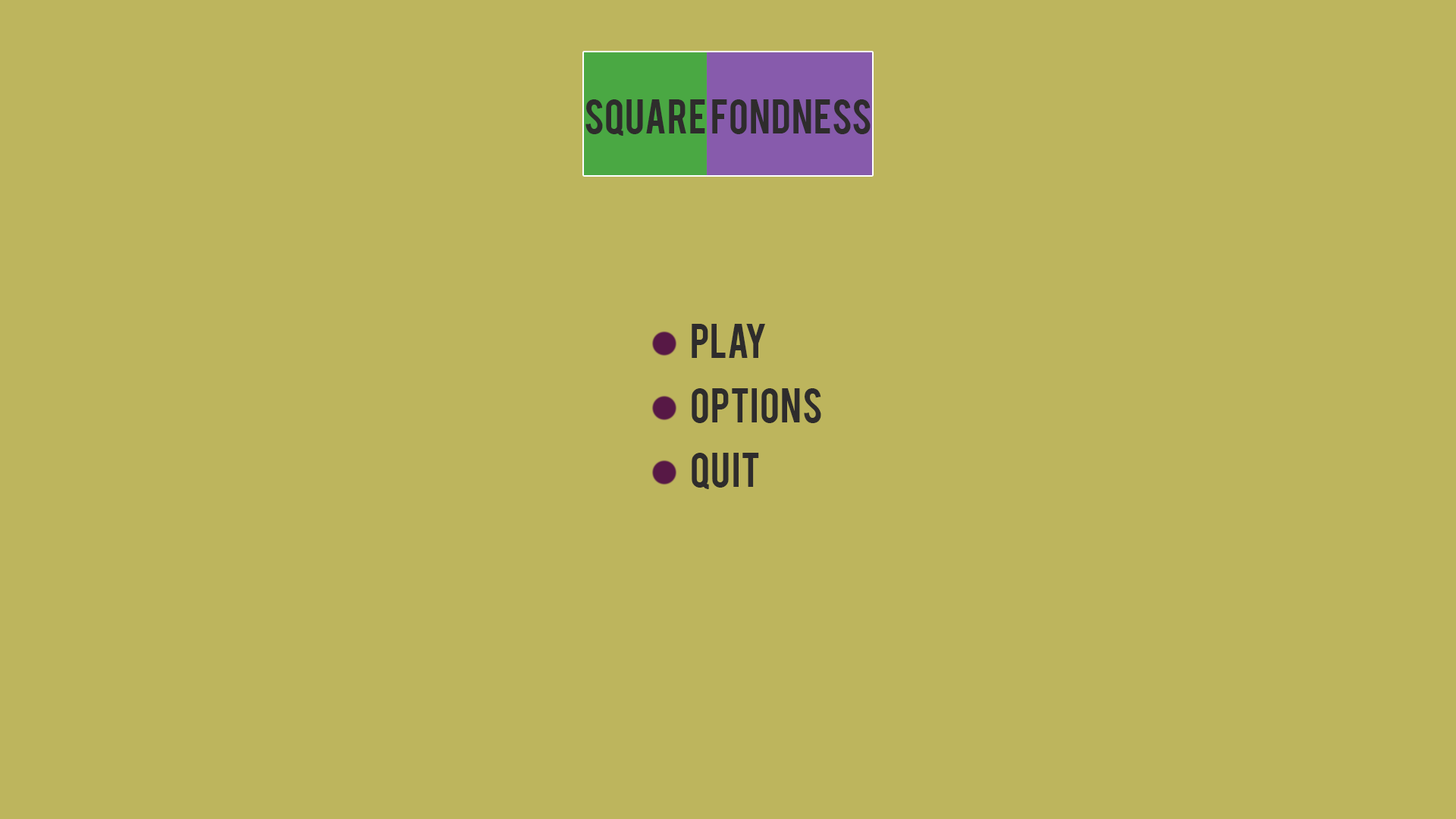
<style>
.page{position:relative;width:1456px;height:819px;background:#bdb55d}
.page>*{position:absolute;margin:0}
.t1{font:37.9px "Bebas";color:#2e2c2c}
</style>
<div class="page">
<p class="t1" style="left:585px;top:99px;width:286px;height:37px">square fondness</p>
<p class="t1" style="left:692px;top:324px;width:73px;height:34px">PLAY</p>
<p class="t1" style="left:692px;top:388px;width:129px;height:35px">OPTIONS</p>
<p class="t1" style="left:692px;top:453px;width:67px;height:36px">QUIT</p>
</div>
